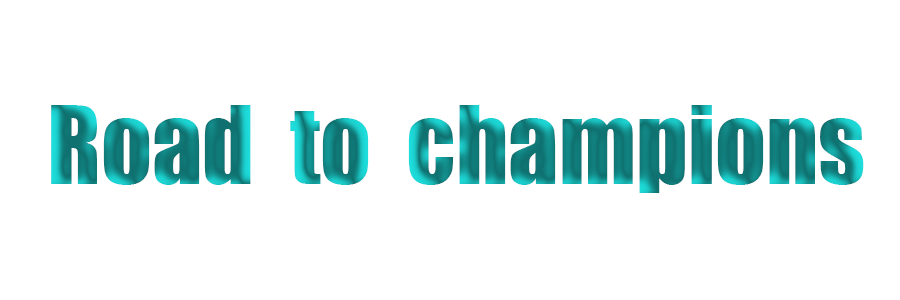
<style>
.page{position:relative;width:900px;height:300px;background:#ffffff}
.page>*{position:absolute;margin:0}
.t1{font:100px "Impact";color:#09886f}
</style>
<div class="page">
<p class="t1" style="left:51px;top:105px;width:813px;height:88px">Road  to  champions</p>
</div>
